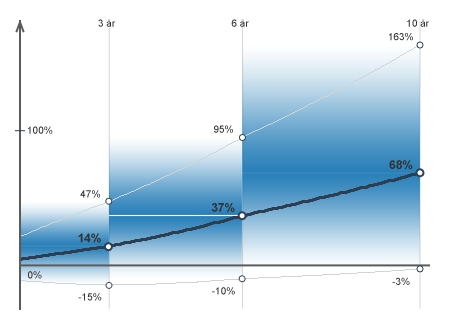
<style>
.page{position:relative;width:450px;height:330px;background:#ffffff}
.page>*{position:absolute;margin:0}
.t1{font:10px "ArialMT";color:#333333}
.t2{font:12px "Arial-BoldMT";color:#333333}
</style>
<div class="page">
<p class="t1" style="left:98px;top:19px;width:18px;height:8px">3 år</p>
<p class="t1" style="left:231px;top:19px;width:18px;height:8px">6 år</p>
<p class="t1" style="left:407px;top:19px;width:22px;height:8px">10 år</p>
<p class="t1" style="left:389px;top:33px;width:24px;height:8px">163%</p>
<p class="t1" style="left:28px;top:126px;width:25px;height:8px">100%</p>
<p class="t1" style="left:214px;top:125px;width:19px;height:8px">95%</p>
<p class="t2" style="left:389px;top:160px;width:24px;height:10px">68%</p>
<p class="t1" style="left:80px;top:190px;width:20px;height:8px">47%</p>
<p class="t2" style="left:211px;top:203px;width:24px;height:9px">37%</p>
<p class="t2" style="left:78px;top:233px;width:23px;height:10px">14%</p>
<p class="t1" style="left:28px;top:271px;width:14px;height:8px">0%</p>
<p class="t1" style="left:392px;top:277px;width:18px;height:8px">-3%</p>
<p class="t1" style="left:78px;top:293px;width:24px;height:8px">-15%</p>
<p class="t1" style="left:212px;top:287px;width:23px;height:8px">-10%</p>
</div>
